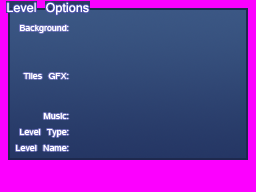
<style>
.page{position:relative;width:256px;height:192px;background:#fc00ff}
.page>*{position:absolute;margin:0}
.t1{font:20px "Kartika";color:#ffffff}
.t2{font:14px/8px "Kartika";color:#ffffff}
</style>
<div class="page">
<p class="t1" style="left:7px;top:2px;width:82px;height:13px">Level Options</p>
<p class="t2" style="left:16px;top:25px;width:53px;height:126px;text-align:right">Background:<br><br><br><br><br><br>Tiles GFX:<br><br><br><br><br>Music:<br><br>Level Type:<br><br>Level Name:</p>
</div>
